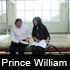
<style>
.page{position:relative;width:70px;height:70px}
.page>*{position:absolute;margin:0}
.t1{font:10.4px "ArialMT";color:#ffffff}
</style>
<div class="page">
<p class="t1" style="left:2px;top:59px;width:65px;height:7px">Prince William</p>
</div>
